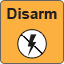
<style>
.page{position:relative;width:64px;height:64px;background:#fbb03f}
.page>*{position:absolute;margin:0}
.t1{font:15px "Arial-BoldMT";color:#231f20}
</style>
<div class="page">
<p class="t1" style="left:7px;top:8px;width:50px;height:11px">Disarm</p>
</div>
